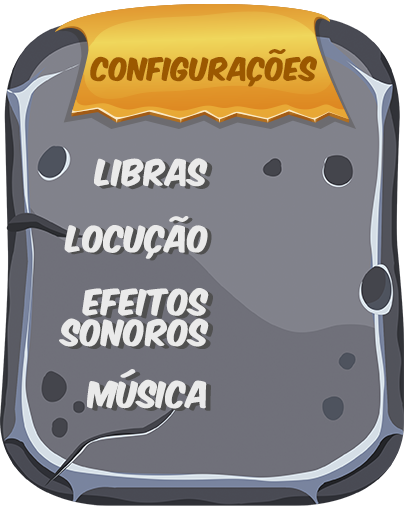
<style>
.page{position:relative;width:404px;height:508px}
.page>*{position:absolute;margin:0}
.t1{font:27px "KomikaAxis";letter-spacing:0.01em;color:#9b5800}
.t2{font:30.6px "KomikaAxis";letter-spacing:0.01em;color:#eaeaea}
.t3{font:30.6px/30.6px "KomikaAxis";letter-spacing:0.01em;color:#eaeaea}
.t4{font:30.7px "KomikaAxis";letter-spacing:0.01em;color:#eaeaea}
</style>
<div class="page">
<p class="t1" style="left:90px;top:49px;width:227px;height:38px">configurações</p>
<p class="t2" style="left:94px;top:158px;width:114px;height:29px">LIBRAS</p>
<p class="t2" style="left:64px;top:216px;width:144px;height:43px">locução</p>
<p class="t3" style="left:59px;top:288px;width:150px;height:59px;text-align:right">EFEITOS<br>SONOROS</p>
<p class="t4" style="left:87px;top:369px;width:120px;height:40px">música</p>
</div>
